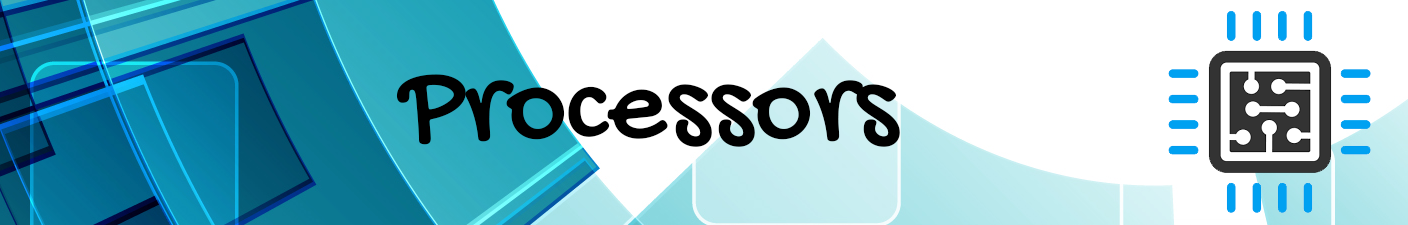
<style>
.page{position:relative;width:1408px;height:225px;background:#ffffff}
.page>*{position:absolute;margin:0}
.t1{font:116.7px "GochiHand-Regular";color:#000000}
</style>
<div class="page">
<p class="t1" style="left:396px;top:74px;width:504px;height:73px">Processors</p>
</div>
